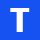
<style>
.page{position:relative;width:40px;height:40px;background:#1651f2}
.page>*{position:absolute;margin:0}
.t1{font:32px "MerriweatherSans-ExtraBold";color:#ffffff}
</style>
<div class="page">
<p class="t1" style="left:10px;top:8px;width:20px;height:24px">T</p>
</div>
